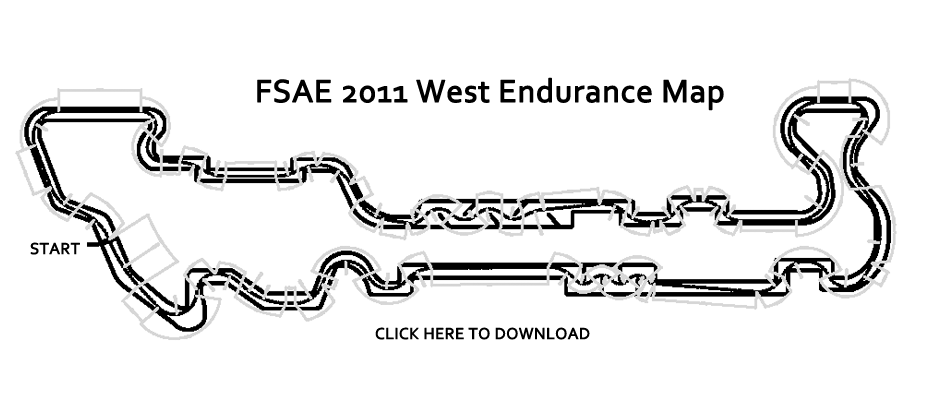
<style>
.page{position:relative;width:940px;height:400px;background:#ffffff}
.page>*{position:absolute;margin:0}
.t1{font:33.3px "Corbel";color:#000000;font-weight:bold}
.t2{font:16.7px "Corbel";color:#000000;font-weight:bold}
</style>
<div class="page">
<p class="t1" style="left:257px;top:77px;width:467px;height:34px">FSAE 2011 West Endurance Map</p>
<p class="t2" style="left:30px;top:242px;width:50px;height:13px">START</p>
<p class="t2" style="left:375px;top:327px;width:215px;height:13px">CLICK HERE TO DOWNLOAD</p>
</div>
